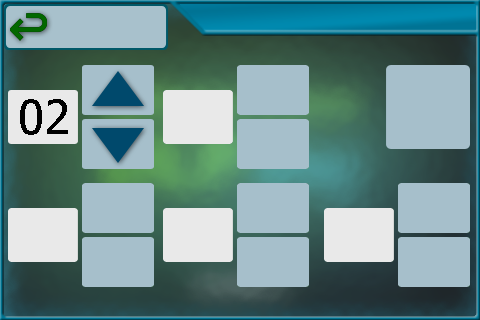
<style>
.page{position:relative;width:480px;height:320px;background:#a6bfcb}
.page>*{position:absolute;margin:0}
.t1{font:47px "Tahoma";color:#000000}
</style>
<div class="page">
<p class="t1" style="left:20px;top:99px;width:48px;height:36px">02</p>
</div>
